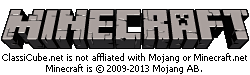
<style>
.page{position:relative;width:250px;height:75px;background:#ffffff}
.page>*{position:absolute;margin:0}
.t1{font:9px "Tahoma";color:#000000}
</style>
<div class="page">
<p class="t1" style="left:2px;top:53px;width:245px;height:21px;text-align:center">ClassiCube.net is not affliated with Mojang or Minecraft.net<br>Minecraft is © 2009-2013 Mojang AB.</p>
</div>
